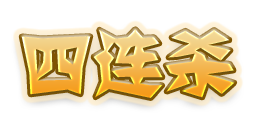
<style>
.page{position:relative;width:256px;height:128px;background:#ffffff}
.page>*{position:absolute;margin:0}
.t1{font:72px "FZJZJW--GB1-0"}
</style>
<div class="page">
<p class="t1" style="left:21px;top:29px;width:214px;height:69px">四连杀</p>
</div>
